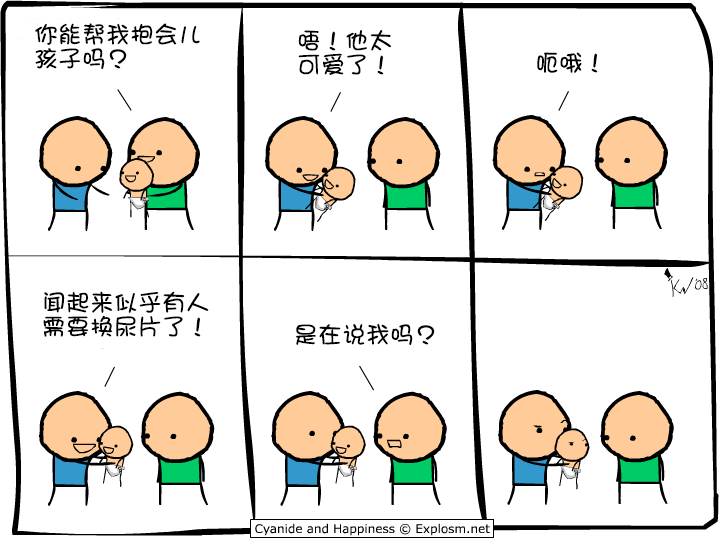
<style>
.page{position:relative;width:719px;height:538px;background:#ffffff}
.page>*{position:absolute;margin:0}
.t1{font:24px/24px "DFGirl";color:#000000}
.t2{font:24px "DFGirl";color:#000000}
</style>
<div class="page">
<p class="t1" style="left:35px;top:23px;width:165px;height:46px">你能帮我抱会儿<br>孩子吗？</p>
<p class="t1" style="left:298px;top:29px;width:94px;height:46px">唔！他太<br>可爱了！</p>
<p class="t2" style="left:537px;top:52px;width:61px;height:21px">呃哦！</p>
<p class="t1" style="left:43px;top:291px;width:166px;height:46px">闻起来似乎有人<br>需要换尿片了！</p>
<p class="t2" style="left:295px;top:323px;width:140px;height:22px">是在说我吗？</p>
</div>
